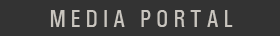
<style>
.page{position:relative;width:280px;height:36px;background:#333333}
.page>*{position:absolute;margin:0}
.t1{font:24px "UniversCondensed";letter-spacing:0.2em;color:#c9c5bf}
</style>
<div class="page">
<p class="t1" style="left:50px;top:10px;width:183px;height:17px">MEDIA PORTAL</p>
</div>
